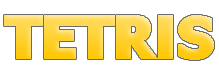
<style>
.page{position:relative;width:219px;height:73px;background:#ffffff}
.page>*{position:absolute;margin:0}
.t1{font:60px "Fava-Black"}
</style>
<div class="page">
<p class="t1" style="left:4px;top:15px;width:210px;height:45px">TETRIS</p>
</div>
